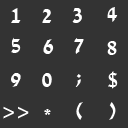
<style>
.page{position:relative;width:128px;height:128px;background:#333333}
.page>*{position:absolute;margin:0}
.t1{font:24px "David-Bold";color:#ffffff}
</style>
<div class="page">
<p class="t1" style="left:11px;top:8px;width:10px;height:15px">1</p>
<p class="t1" style="left:42px;top:9px;width:10px;height:14px">2</p>
<p class="t1" style="left:72px;top:8px;width:10px;height:15px">3</p>
<p class="t1" style="left:107px;top:7px;width:11px;height:15px">4</p>
<p class="t1" style="left:11px;top:37px;width:10px;height:16px">5</p>
<p class="t1" style="left:43px;top:39px;width:11px;height:15px">6</p>
<p class="t1" style="left:74px;top:38px;width:10px;height:16px">7</p>
<p class="t1" style="left:107px;top:41px;width:10px;height:14px">8</p>
<p class="t1" style="left:11px;top:73px;width:10px;height:14px">9</p>
<p class="t1" style="left:42px;top:73px;width:10px;height:14px">0</p>
<p class="t1" style="left:75px;top:74px;width:6px;height:13px">;</p>
<p class="t1" style="left:108px;top:71px;width:10px;height:18px">$</p>
<p class="t1" style="left:76px;top:102px;width:7px;height:18px">(</p>
<p class="t1" style="left:109px;top:102px;width:7px;height:18px">)</p>
<p class="t1" style="left:3px;top:106px;width:26px;height:13px">&gt;&gt;</p>
<p class="t1" style="left:44px;top:109px;width:7px;height:6px">*</p>
</div>
